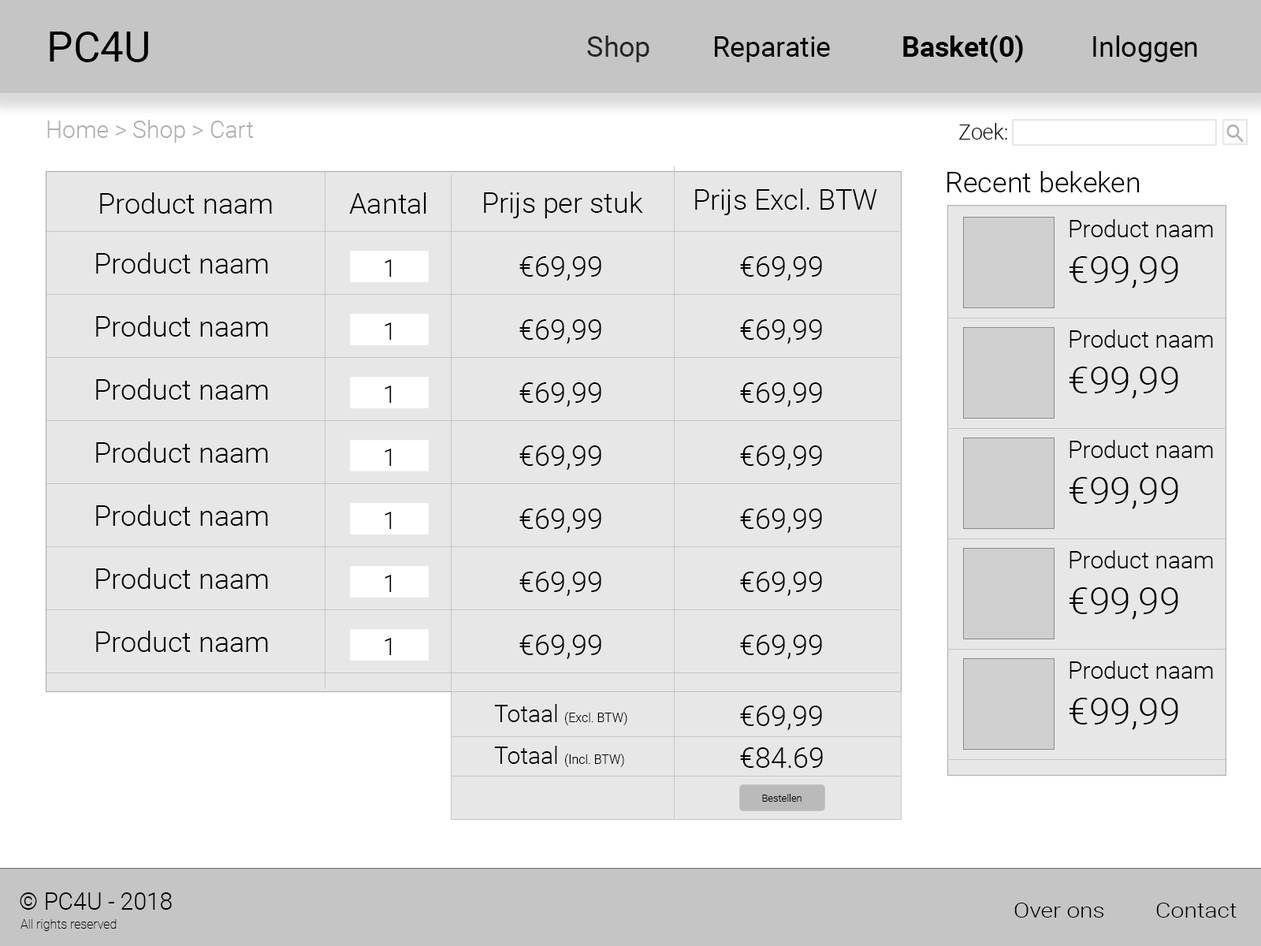
<style>
.page{position:relative;width:1261px;height:946px;background:#e7e7e7}
.page>*{position:absolute;margin:0}
.t1{font:42px "Roboto-Regular";color:#000000}
.t2{font:28px "Roboto-Regular";color:#000000}
.t3{font:28px "Roboto-Regular";color:#262626}
.t4{font:28px "Roboto-Bold";color:#000000}
.t5{font:23.6px "Roboto-Light";color:#afafaf}
.t6{font:21px "Roboto-Light";color:#000000}
.t7{font:28.4px "Roboto-Light";color:#000000}
.t8{font:23.6px "Roboto-Light";color:#000000}
.t9{font:37.8px "Roboto-Light";color:#000000}
.t10{font:12.6px "Roboto-Light";color:#000000}
.t11{font:10px "Roboto-Light";color:#000000}
.t12{font:20.4px "Roboto-Light";color:#000000;scale:1.16 1}
.t13{font:12.6px "Roboto-Thin";color:#000000}
</style>
<div class="page">
<p class="t1" style="left:50px;top:32px;width:98px;height:30px">PC4U</p>
<p class="t2" style="left:587px;top:35px;width:610px;height:28px"><span class="t3">Shop</span>  Reparatie   <span class="t4">Basket(0)</span>   Inloggen</p>
<p class="t5" style="left:47px;top:120px;width:207px;height:23px">Home &gt; Shop &gt; Cart</p>
<p class="t6" style="left:959px;top:123px;width:48px;height:16px">Zoek:</p>
<p class="t7" style="left:947px;top:171px;width:193px;height:21px">Recent bekeken</p>
<p class="t7" style="left:100px;top:192px;width:172px;height:22px">Product naam</p>
<p class="t7" style="left:349px;top:192px;width:77px;height:22px">Aantal</p>
<p class="t7" style="left:484px;top:192px;width:159px;height:26px">Prijs per stuk</p>
<p class="t7" style="left:695px;top:188px;width:182px;height:27px">Prijs Excl. BTW</p>
<p class="t8" style="left:1069px;top:219px;width:144px;height:18px">Product naam</p>
<p class="t7" style="left:96px;top:252px;width:172px;height:21px">Product naam</p>
<p class="t7" style="left:519px;top:256px;width:82px;height:25px">€69,99</p>
<p class="t7" style="left:740px;top:256px;width:82px;height:25px">€69,99</p>
<p class="t9" style="left:1069px;top:256px;width:109px;height:32px">€99,99</p>
<p class="t8" style="left:385px;top:259px;width:7px;height:18px">1</p>
<p class="t7" style="left:96px;top:315px;width:172px;height:22px">Product naam</p>
<p class="t8" style="left:385px;top:322px;width:7px;height:18px">1</p>
<p class="t7" style="left:519px;top:319px;width:82px;height:25px">€69,99</p>
<p class="t7" style="left:740px;top:319px;width:82px;height:25px">€69,99</p>
<p class="t8" style="left:1069px;top:329px;width:144px;height:19px">Product naam</p>
<p class="t9" style="left:1069px;top:366px;width:109px;height:33px">€99,99</p>
<p class="t7" style="left:96px;top:378px;width:172px;height:22px">Product naam</p>
<p class="t8" style="left:385px;top:385px;width:7px;height:18px">1</p>
<p class="t7" style="left:519px;top:382px;width:82px;height:25px">€69,99</p>
<p class="t7" style="left:740px;top:382px;width:82px;height:25px">€69,99</p>
<p class="t7" style="left:96px;top:441px;width:172px;height:22px">Product naam</p>
<p class="t8" style="left:385px;top:448px;width:7px;height:18px">1</p>
<p class="t7" style="left:519px;top:445px;width:82px;height:25px">€69,99</p>
<p class="t7" style="left:740px;top:445px;width:82px;height:25px">€69,99</p>
<p class="t8" style="left:1069px;top:440px;width:144px;height:18px">Product naam</p>
<p class="t9" style="left:1069px;top:477px;width:109px;height:32px">€99,99</p>
<p class="t7" style="left:96px;top:504px;width:172px;height:22px">Product naam</p>
<p class="t7" style="left:519px;top:508px;width:82px;height:25px">€69,99</p>
<p class="t7" style="left:740px;top:508px;width:82px;height:25px">€69,99</p>
<p class="t8" style="left:385px;top:511px;width:7px;height:18px">1</p>
<p class="t8" style="left:1069px;top:550px;width:144px;height:18px">Product naam</p>
<p class="t7" style="left:96px;top:567px;width:172px;height:22px">Product naam</p>
<p class="t8" style="left:385px;top:575px;width:7px;height:17px">1</p>
<p class="t7" style="left:519px;top:571px;width:82px;height:25px">€69,99</p>
<p class="t7" style="left:740px;top:571px;width:82px;height:25px">€69,99</p>
<p class="t9" style="left:1069px;top:587px;width:109px;height:32px">€99,99</p>
<p class="t7" style="left:96px;top:630px;width:172px;height:22px">Product naam</p>
<p class="t8" style="left:385px;top:638px;width:7px;height:17px">1</p>
<p class="t7" style="left:519px;top:634px;width:82px;height:25px">€69,99</p>
<p class="t7" style="left:740px;top:634px;width:82px;height:25px">€69,99</p>
<p class="t8" style="left:1069px;top:660px;width:144px;height:19px">Product naam</p>
<p class="t9" style="left:1069px;top:697px;width:109px;height:33px">€99,99</p>
<p class="t10" style="left:494px;top:704px;width:133px;height:21px"><span class="t8">Totaal </span>(Excl. BTW)</p>
<p class="t7" style="left:740px;top:705px;width:82px;height:25px">€69,99</p>
<p class="t10" style="left:494px;top:746px;width:130px;height:21px"><span class="t8">Totaal </span>(Incl. BTW)</p>
<p class="t7" style="left:740px;top:747px;width:83px;height:21px">€84.69</p>
<p class="t11" style="left:762px;top:794px;width:39px;height:7px">Bestellen</p>
<p class="t8" style="left:20px;top:892px;width:152px;height:17px">© PC4U - 2018</p>
<p class="t12" style="left:1014px;top:902px;width:222px;height:15px">Over ons  Contact</p>
<p class="t13" style="left:20px;top:919px;width:97px;height:12px">All rights reserved</p>
</div>
